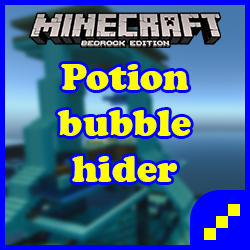
<style>
.page{position:relative;width:250px;height:250px}
.page>*{position:absolute;margin:0}
.t1{font:38.4px "CooperBlack";color:#ffff00}
</style>
<div class="page">
<p class="t1" style="left:57px;top:64px;width:134px;height:118px;text-align:center">Potion<br>bubble<br>hider</p>
</div>
